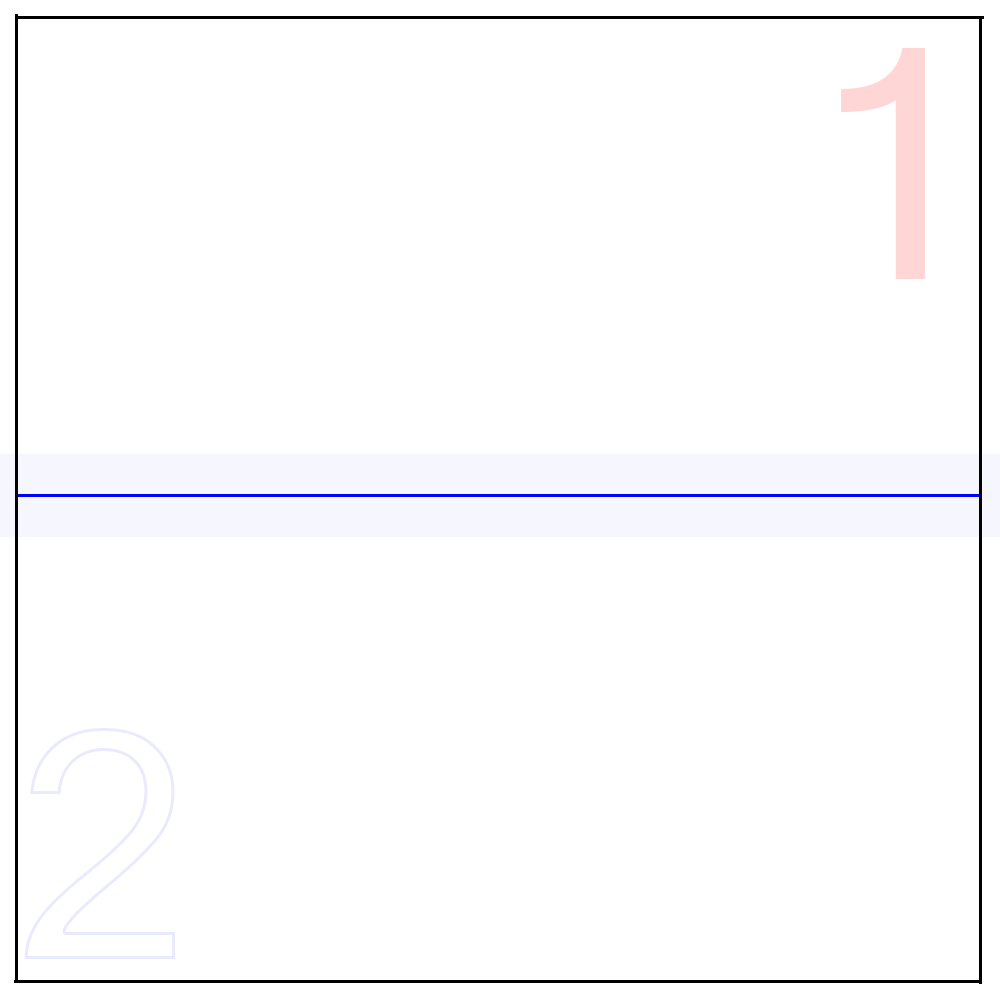
<style>
.page{position:relative;width:1000px;height:1000px;background:#ffffff}
.page>*{position:absolute;margin:0}
.t1{font:316.7px "MicrosoftSansSerif";color:#ffd6d6}
.t2{font:316.7px "MicrosoftSansSerif";color:#ffffff}
</style>
<div class="page">
<p class="t1" style="left:841px;top:48px;width:84px;height:231px">1</p>
<p class="t2" style="left:24px;top:728px;width:152px;height:231px;opacity:0.23">2</p>
</div>
